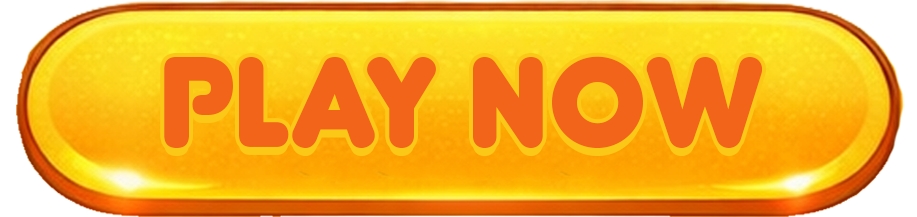
<style>
.page{position:relative;width:917px;height:217px}
.page>*{position:absolute;margin:0}
.t1{font:127.4px "Junegull-Regular";color:#f16419}
</style>
<div class="page">
<p class="t1" style="left:164px;top:64px;width:599px;height:92px">PLAY NOW</p>
<p class="t1" style="left:164px;top:56px;width:599px;height:92px">PLAY NOW</p>
</div>
